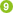
<style>
.page{position:relative;width:13px;height:13px;background:#8fc11d}
.page>*{position:absolute;margin:0}
.t1{font:10px "ArialMT";letter-spacing:-0.075em;color:#ffffff;font-weight:bold}
</style>
<div class="page">
<p class="t1" style="left:3px;top:2px;width:6px;height:9px">9</p>
</div>
